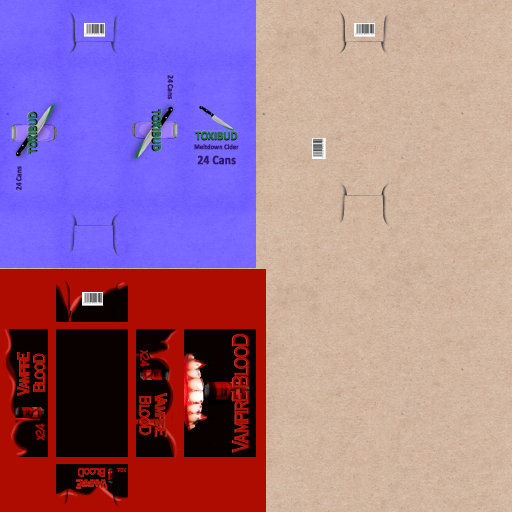
<style>
.page{position:relative;width:512px;height:512px}
.page>*{position:absolute;margin:0}
.t1{font:8px "Calibri-Bold";letter-spacing:-0.01em;color:#301770;font-weight:bold;scale:0.9 1}
.t2{font:12px "Calibri-Bold";letter-spacing:-0.01em;color:#207349;font-weight:bold;scale:0.9 1}
.t3{font:7.1px "Calibri-Bold";letter-spacing:-0.01em;color:#301770;font-weight:bold;scale:0.9 1}
.t4{font:12.9px "Calibri-Bold";letter-spacing:-0.01em;color:#301770;font-weight:bold;scale:0.9 1}
.t5{font:23.3px "CopperplateGothic-Light";letter-spacing:-0.1em;color:#ae0c00;font-weight:bold;scale:0.71 1}
.t6{font:16.5px "CopperplateGothic-Light";letter-spacing:-0.1em;color:#ae0c00;font-weight:bold;scale:0.71 1}
.t7{font:12.5px "CopperplateGothic-Light";letter-spacing:-0.1em;color:#ae0c00;font-weight:bold;scale:0.72 1}
.t8{font:16.5px "CopperplateGothic-Light";letter-spacing:-0.1em;color:#ae0c00;font-weight:bold;scale:0.72 1}
.t9{font:16.5px "CopperplateGothic-Light";letter-spacing:-0.1em;color:#9c190e;font-weight:bold;scale:0.72 1}
.t10{font:11.9px "CopperplateGothic-Light";letter-spacing:-0.1em;color:#ae0c00;font-weight:bold;scale:0.71 1}
.t11{font:6.5px "CopperplateGothic-Light";letter-spacing:-0.1em;color:#ae0c00;font-weight:bold;scale:0.72 1}
</style>
<div class="page">
<p class="t1" style="left:167px;top:75px;width:7px;height:25px;rotate:90deg">24 Cans</p>
<p class="t2" style="left:27px;top:112px;width:10px;height:43px;rotate:-90deg">TOXIBUD</p>
<p class="t2" style="left:153px;top:108px;width:9px;height:43px;rotate:90deg">TOXIBUD</p>
<p class="t2" style="left:195px;top:131px;width:43px;height:9px">TOXIBUD</p>
<p class="t3" style="left:194px;top:144px;width:45px;height:6px">Meltdown Cider</p>
<p class="t4" style="left:197px;top:155px;width:39px;height:10px">24 Cans</p>
<p class="t1" style="left:15px;top:166px;width:7px;height:25px;rotate:-90deg">24 Cans</p>
<p class="t5" style="left:231px;top:334px;width:18px;height:119px;rotate:-90deg">VampirE BlooD</p>
<p class="t5" style="left:232px;top:334px;width:18px;height:119px;rotate:-90deg">VampirE BlooD</p>
<p class="t5" style="left:233px;top:334px;width:18px;height:119px;rotate:-90deg">VampirE BlooD</p>
<p class="t6" style="left:16px;top:352px;width:30px;height:44px;text-align:center;rotate:-90deg">VampirE<br>BlooD</p>
<p class="t6" style="left:17px;top:352px;width:29px;height:44px;text-align:center;rotate:-90deg">VampirE<br>BlooD</p>
<p class="t6" style="left:18px;top:352px;width:29px;height:44px;text-align:center;rotate:-90deg">VampirE<br>BlooD</p>
<p class="t7" style="left:139px;top:349px;width:11px;height:18px;rotate:90deg">x24</p>
<p class="t8" style="left:137px;top:392px;width:30px;height:45px;text-align:center;rotate:90deg">VampirE<br>BlooD</p>
<p class="t9" style="left:138px;top:393px;width:30px;height:45px;text-align:center;rotate:90deg">VampirE<br>BlooD</p>
<p class="t8" style="left:138px;top:393px;width:29px;height:44px;text-align:center;rotate:90deg">VampirE<br>BlooD</p>
<p class="t8" style="left:139px;top:392px;width:29px;height:45px;text-align:center;rotate:90deg">VampirE<br>BlooD</p>
<p class="t7" style="left:35px;top:423px;width:10px;height:18px;rotate:-90deg">x24</p>
<p class="t10" style="left:76px;top:467px;width:32px;height:21px;text-align:center;rotate:180deg">VampirE<br>BlooD</p>
<p class="t10" style="left:76px;top:468px;width:32px;height:21px;text-align:center;rotate:180deg">VampirE<br>BlooD</p>
<p class="t10" style="left:76px;top:468px;width:32px;height:20px;text-align:center;rotate:180deg">VampirE<br>BlooD</p>
<p class="t11" style="left:117px;top:468px;width:10px;height:4px;rotate:180deg">x24</p>
</div>
